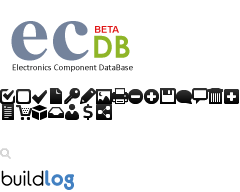
<style>
.page{position:relative;width:240px;height:192px;background:#ffffff}
.page>*{position:absolute;margin:0}
.t1{font:81.7px "TimesNewRomanPS-BoldMT";color:#74839c;scale:1.14 1}
.t2{font:9.3px "Arial-BoldMT";color:#e01515}
.t3{font:30.7px "CenturyGothic-Bold";color:#8fb528}
.t4{font:9px "Calibri"}
.t5{font:24px "Eurofurenceregular";color:#000000}
.t6{font:24px "Eurofurencebold";color:#4381c2}
</style>
<div class="page">
<p class="t1" style="left:11px;top:21px;width:78px;height:40px">ec</p>
<p class="t2" style="left:95px;top:26px;width:24px;height:7px">BETA</p>
<p class="t3" style="left:94px;top:35px;width:36px;height:23px">DB</p>
<p class="t4" style="left:12px;top:64px;width:121px;height:8px">Electronics Component DataBase</p>
<p class="t5" style="left:1px;top:170px;width:73px;height:20px">build<span class="t6">log</span></p>
</div>
